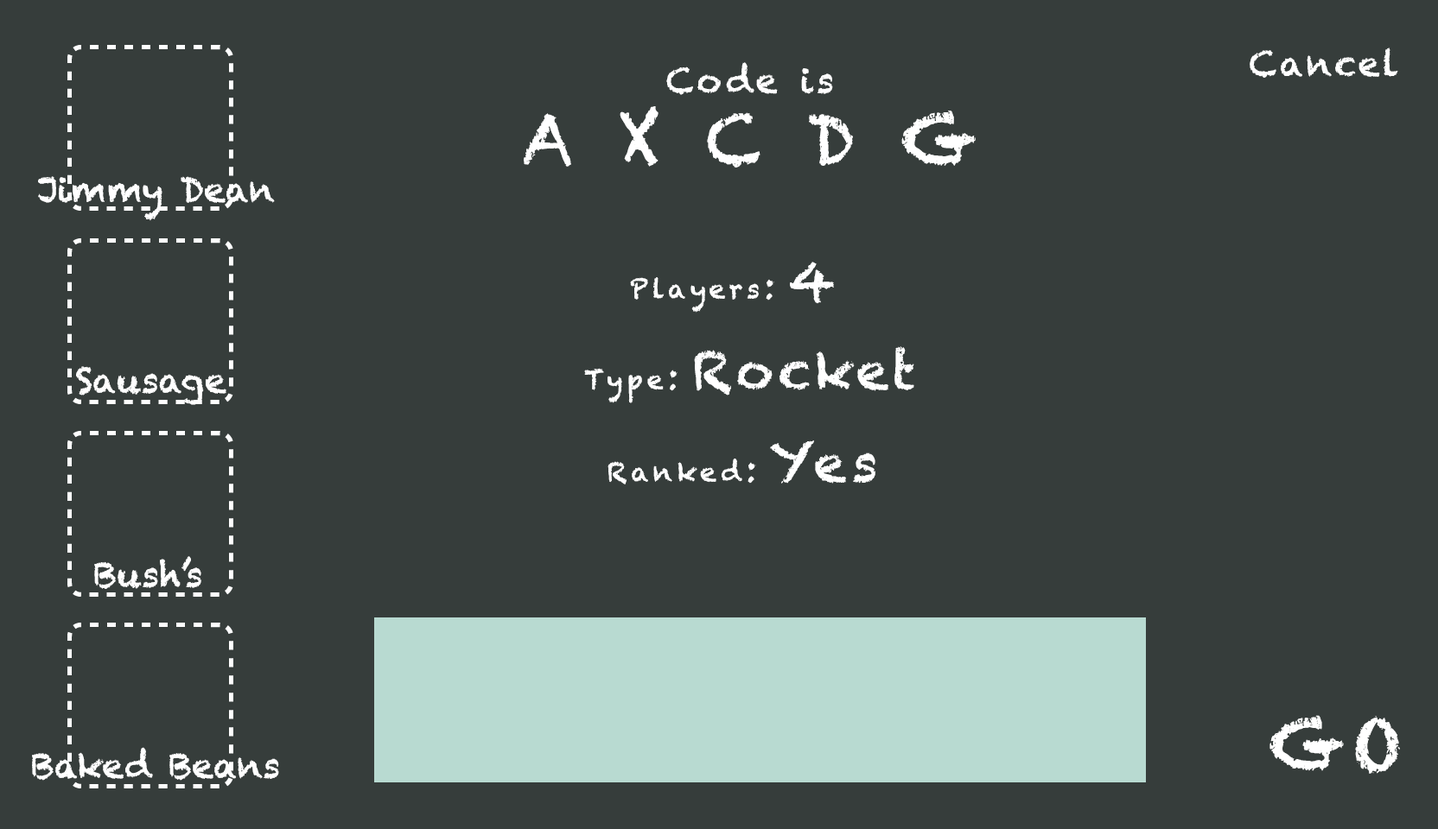
<style>
.page{position:relative;width:1438px;height:829px;background:#363d3b}
.page>*{position:absolute;margin:0}
.t1{font:34.6px "Chalkduster";letter-spacing:0.08em;color:#ffffff}
.t2{font:69.1px/70.9px "Chalkduster";letter-spacing:0.08em;color:#ffffff}
.t3{font:34.6px/70.9px "Chalkduster";letter-spacing:0.08em;color:#ffffff}
.t4{font:34.6px "Chalkduster";color:#ffffff}
.t5{font:25.9px "Chalkduster";letter-spacing:0.08em;color:#ffffff}
.t6{font:51.8px "Chalkduster";letter-spacing:0.08em;color:#ffffff}
.t7{font:69.1px "Chalkduster";letter-spacing:0.08em;color:#ffffff}
</style>
<div class="page">
<p class="t1" style="left:1249px;top:48px;width:149px;height:30px">Cancel</p>
<p class="t2" style="left:524px;top:62px;width:451px;height:106px;text-align:center"><span class="t3">Code is<br></span>A X C D G</p>
<p class="t4" style="left:38px;top:176px;width:237px;height:45px">Jimmy Dean</p>
<p class="t5" style="left:630px;top:262px;width:204px;height:51px">Players<span class="t1">: </span><span class="t6">4</span></p>
<p class="t6" style="left:584px;top:346px;width:330px;height:57px"><span class="t5">Type</span><span class="t1">: </span>Rocket</p>
<p class="t4" style="left:76px;top:366px;width:150px;height:39px">Sausage</p>
<p class="t5" style="left:607px;top:441px;width:268px;height:44px">Ranked<span class="t1">: </span><span class="t6">Yes</span></p>
<p class="t4" style="left:94px;top:556px;width:107px;height:33px">Bush’s</p>
<p class="t7" style="left:1269px;top:715px;width:131px;height:59px">GO</p>
<p class="t4" style="left:32px;top:747px;width:247px;height:34px">Baked Beans</p>
</div>
